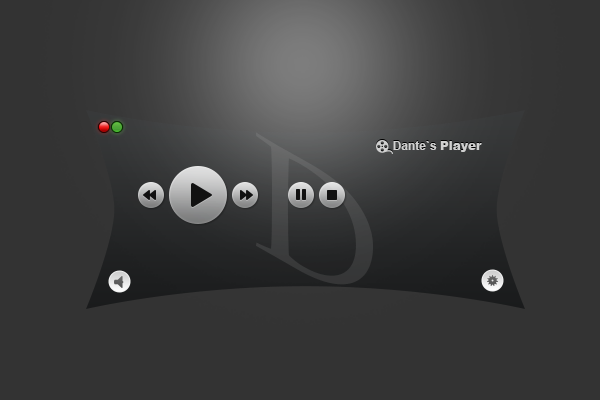
<style>
.page{position:relative;width:600px;height:400px;background:#333333}
.page>*{position:absolute;margin:0}
.t1{font:12px "Arial-BoldMT";color:#d0d0d0}
.t2{font:12px "Arial-Black";color:#d0d0d0}
</style>
<div class="page">
<p class="t1" style="left:393px;top:141px;width:89px;height:11px">Dante`s <span class="t2">Player</span></p>
</div>
